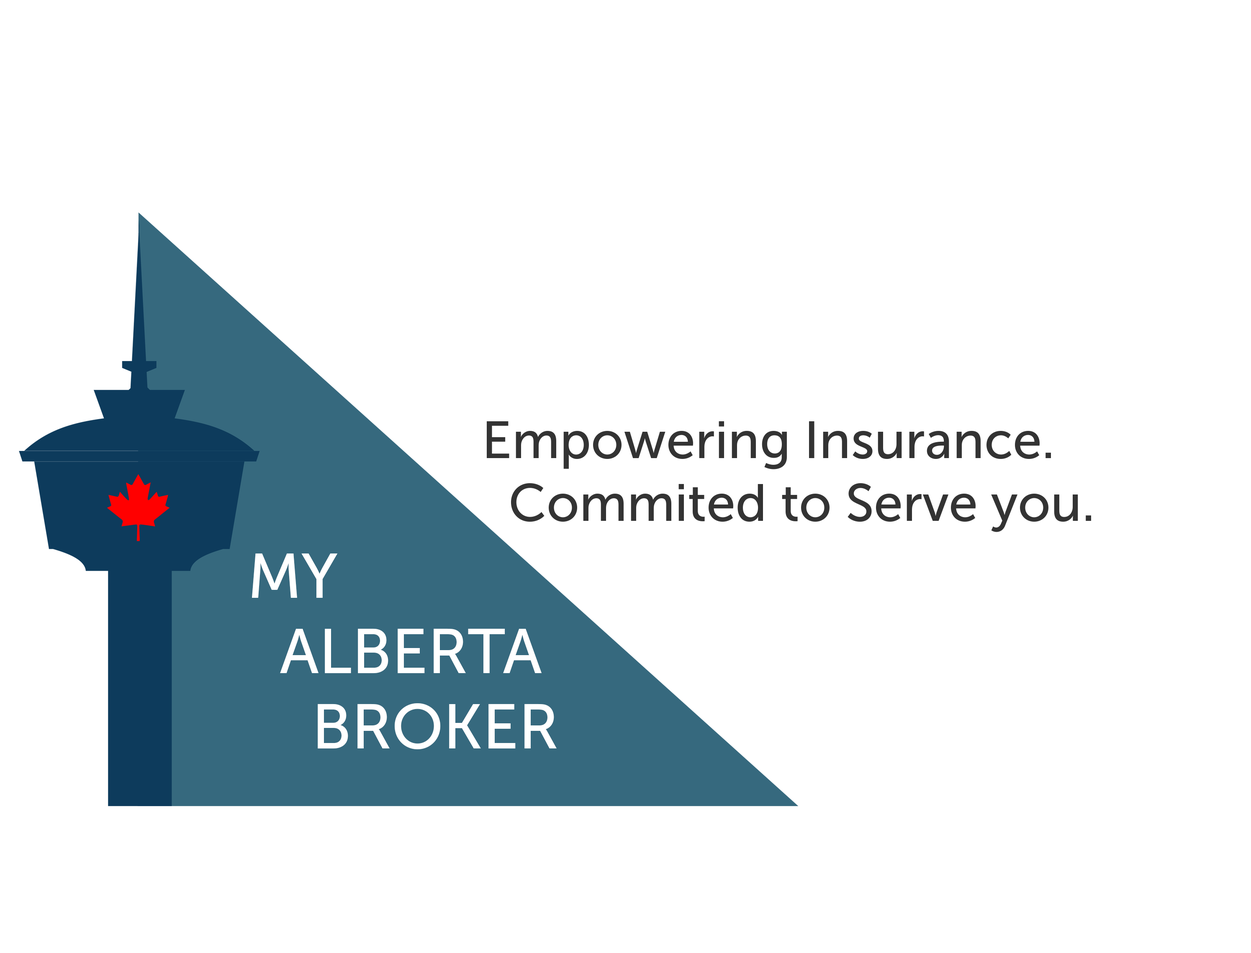
<style>
.page{position:relative;width:1251px;height:953px;background:#ffffff}
.page>*{position:absolute;margin:0}
.t1{font:52.3px "MuseoSans-500";color:#333333}
.t2{font:62.8px "MuseoSans-500";color:#ffffff}
</style>
<div class="page">
<p class="t1" style="left:487px;top:421px;width:604px;height:111px">Empowering Insurance.<br>  Commited to Serve you.</p>
<p class="t2" style="left:252px;top:554px;width:305px;height:196px">MY<br>  ALBERTA<br>    BROKER</p>
</div>
